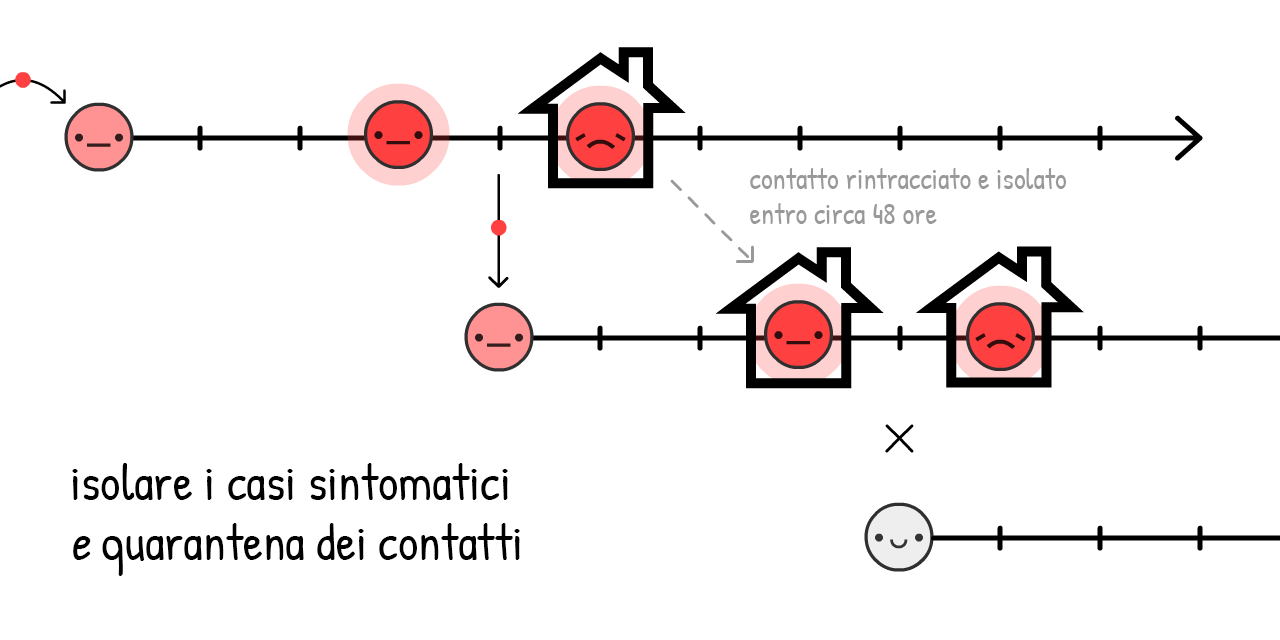
<style>
.page{position:relative;width:1280px;height:640px;background:#ffffff}
.page>*{position:absolute;margin:0}
.t1{font:29.1px "PatrickHand-Regular";color:#999999}
.t2{font:50px "PatrickHand-Regular";color:#000000}
.t3{font:50px "PatrickHand-Regular";color:#000000;font-style:italic}
</style>
<div class="page">
<p class="t1" style="left:750px;top:168px;width:316px;height:56px">contatto rintracciato e isolato<br>entro circa 48 ore</p>
<p class="t2" style="left:72px;top:463px;width:448px;height:113px">isolare i casi sintomatici<br><span class="t3">e </span>quarantena dei contatti</p>
</div>
